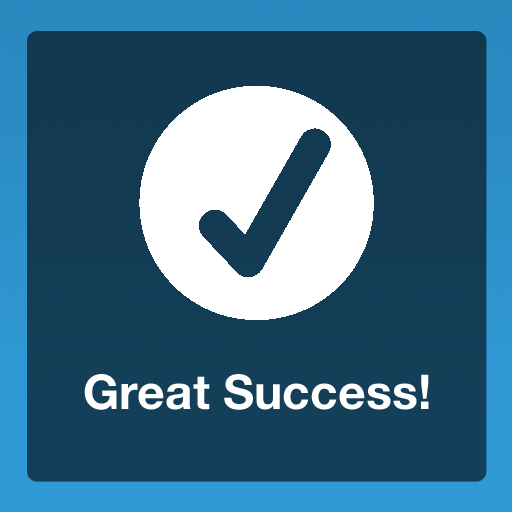
<style>
.page{position:relative;width:512px;height:512px}
.page>*{position:absolute;margin:0}
.t1{font:48px "HelveticaNeue-Bold";color:#ffffff}
</style>
<div class="page">
<p class="t1" style="left:84px;top:374px;width:345px;height:36px">Great Success!</p>
</div>
